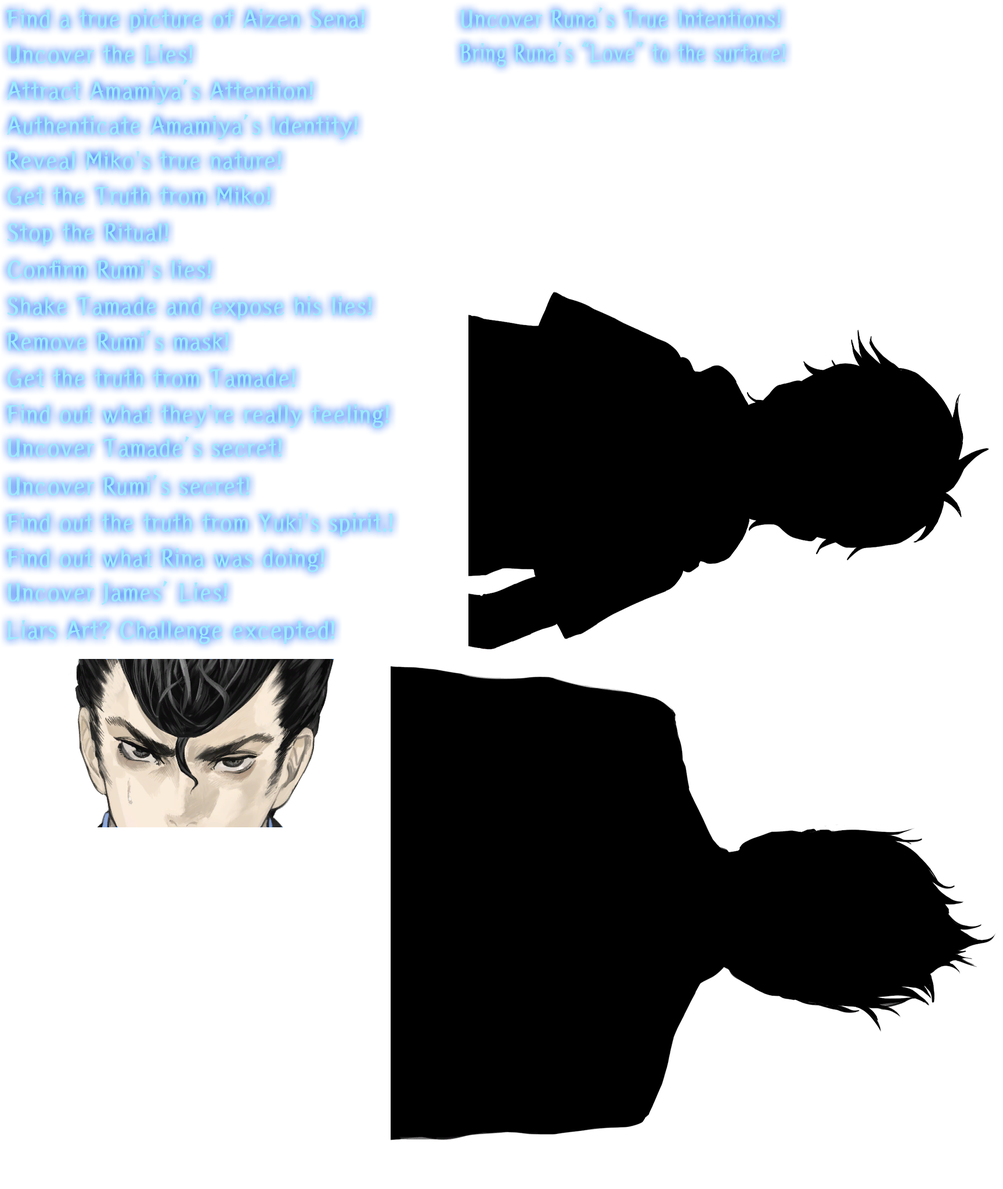
<style>
.page{position:relative;width:1003px;height:1189px;background:#ffffff}
.page>*{position:absolute;margin:0}
.t1{font:25px "MoariaStd-Bold";letter-spacing:0.02em;color:#9cebff;scale:0.89 1}
.t2{font:25px "MoariaStd-Bold";letter-spacing:0.02em;color:#9cebff;scale:0.84 1}
.t3{font:25px "MoariaStd-Bold";letter-spacing:0.02em;color:#9cebff;scale:0.77 1}
</style>
<div class="page">
<p class="t1" style="left:6px;top:9px;width:359px;height:24px">Find a true picture of Aizen Sena!</p>
<p class="t2" style="left:460px;top:7px;width:321px;height:22px">Uncover Runa’s True Intentions!</p>
<p class="t3" style="left:460px;top:41px;width:325px;height:26px">Bring Runa’s “Love” to the surface!</p>
<p class="t1" style="left:8px;top:44px;width:185px;height:21px">Uncover the Lies!</p>
<p class="t1" style="left:7px;top:79px;width:306px;height:26px">Attract Amamiya’s Attention!</p>
<p class="t1" style="left:7px;top:114px;width:351px;height:26px">Authenticate Amamiya’s Identity!</p>
<p class="t1" style="left:6px;top:150px;width:276px;height:21px">Reveal Miko's true nature!</p>
<p class="t1" style="left:8px;top:186px;width:262px;height:20px">Get the Truth from Miko!</p>
<p class="t1" style="left:7px;top:222px;width:161px;height:25px">Stop the Ritual!</p>
<p class="t1" style="left:8px;top:259px;width:203px;height:21px">Confirm Rumi's lies!</p>
<p class="t1" style="left:7px;top:296px;width:365px;height:24px">Shake Tamade and expose his lies!</p>
<p class="t1" style="left:6px;top:330px;width:223px;height:22px">Remove Rumi’s mask!</p>
<p class="t1" style="left:8px;top:369px;width:287px;height:19px">Get the truth from Tamade!</p>
<p class="t1" style="left:6px;top:404px;width:383px;height:24px">Find out what they're really feeling!</p>
<p class="t1" style="left:8px;top:436px;width:274px;height:21px">Uncover Tamade’s secret!</p>
<p class="t1" style="left:8px;top:474px;width:242px;height:22px">Uncover Rumi’s secret!</p>
<p class="t1" style="left:6px;top:513px;width:387px;height:24px">Find out the truth from Yuki's spirit.!</p>
<p class="t1" style="left:6px;top:548px;width:318px;height:24px">Find out what Rina was doing!</p>
<p class="t1" style="left:8px;top:580px;width:220px;height:25px">Uncover James’ Lies!</p>
<p class="t1" style="left:7px;top:620px;width:327px;height:24px">Liars Art? Challenge excepted!</p>
</div>
